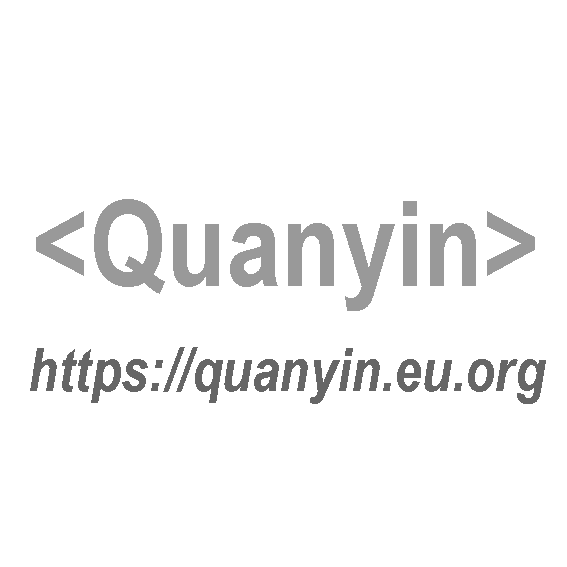
<style>
.page{position:relative;width:567px;height:567px;background:#ffffff}
.page>*{position:absolute;margin:0}
.t1{font:120px "ArialNarrow-Bold";color:#999999}
.t2{font:60px "ArialNarrow-BoldItalic";color:#666666}
</style>
<div class="page">
<p class="t1" style="left:36px;top:199px;width:499px;height:112px">&lt;Quanyin&gt;</p>
<p class="t2" style="left:30px;top:347px;width:516px;height:57px">https://quanyin.eu.org</p>
</div>
